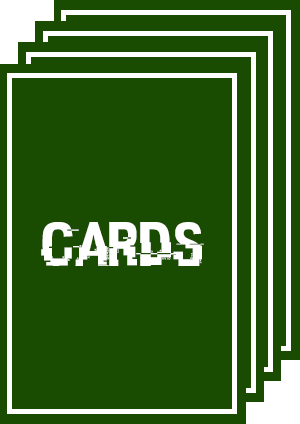
<style>
.page{position:relative;width:300px;height:424px;background:#194c00}
.page>*{position:absolute;margin:0}
.t1{font:62.9px "HACKED";color:#ffffff;scale:1.06 1}
</style>
<div class="page">
<p class="t1" style="left:41px;top:222px;width:163px;height:44px">CARDS</p>
</div>
